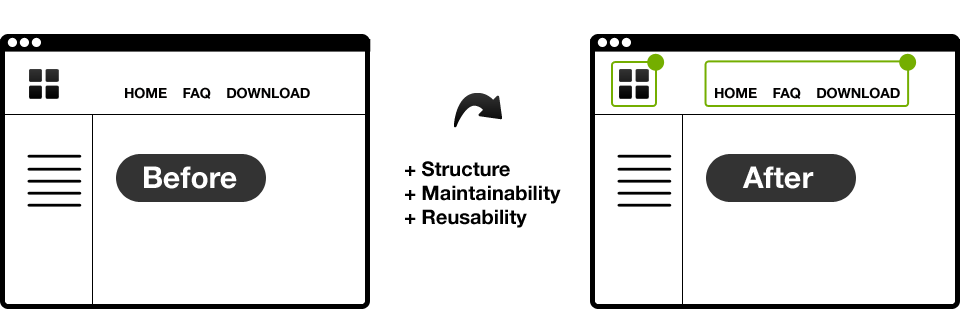
<style>
.page{position:relative;width:960px;height:315px;background:#ffffff}
.page>*{position:absolute;margin:0}
.t1{font:14px "HelveticaNeue-Bold";color:#010000}
.t2{font:20px "HelveticaNeue-Bold";color:#000000}
.t3{font:30px "HelveticaNeue-Bold";color:#ffffff}
</style>
<div class="page">
<p class="t1" style="left:125px;top:87px;width:185px;height:12px">HOME    FAQ    DOWNLOAD</p>
<p class="t1" style="left:715px;top:87px;width:185px;height:12px">HOME    FAQ    DOWNLOAD</p>
<p class="t2" style="left:405px;top:161px;width:156px;height:67px">+ Structure<br>+ Maintainability<br>+ Reusability</p>
<p class="t3" style="left:144px;top:166px;width:93px;height:23px">Before</p>
<p class="t3" style="left:742px;top:166px;width:72px;height:23px">After</p>
</div>
